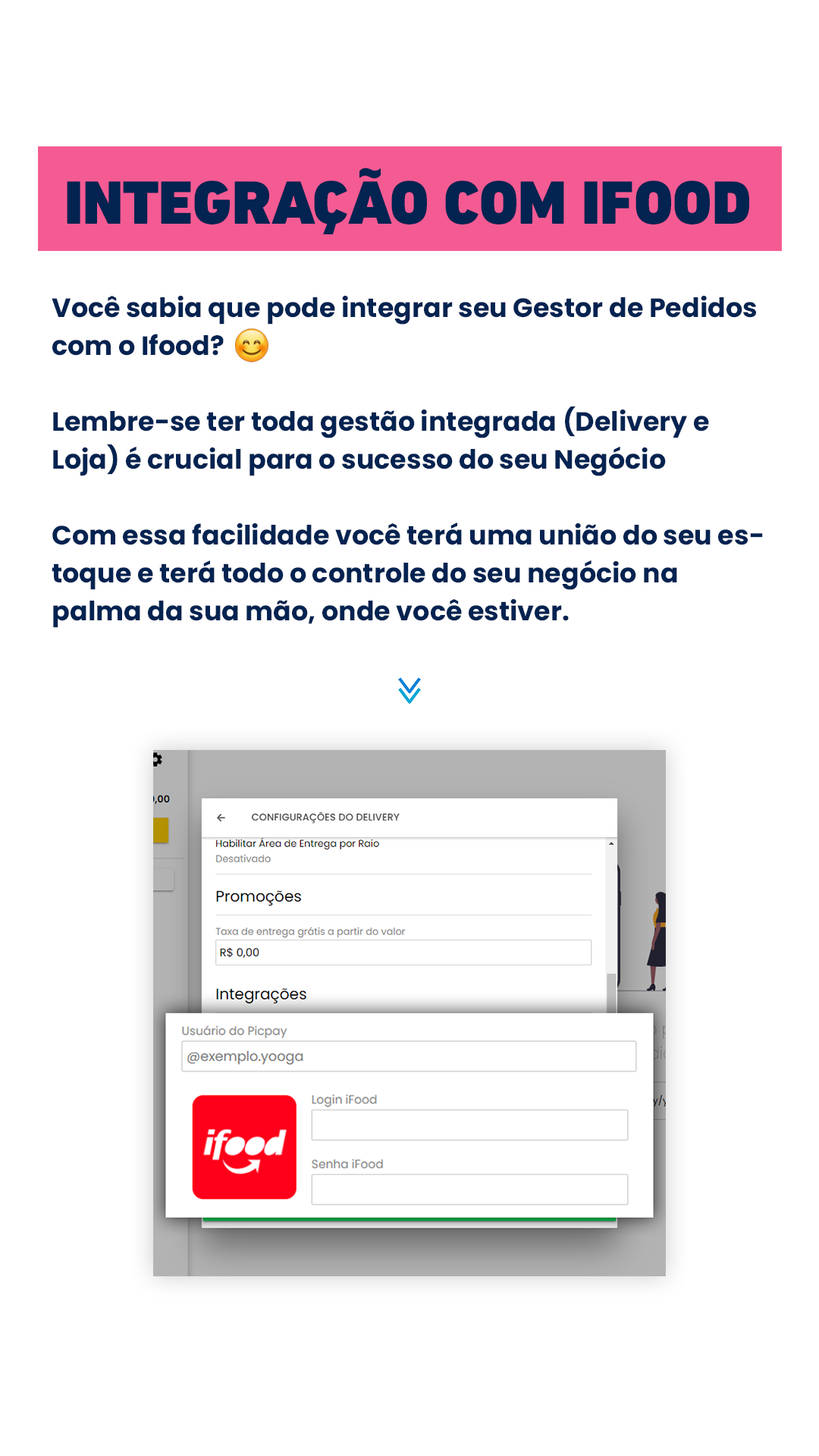
<style>
.page{position:relative;width:819px;height:1456px;background:#ffffff}
.page>*{position:absolute;margin:0}
.t1{font:62.1px "DINNextLTPro-Black";color:#032351;text-transform:uppercase}
.t2{font:26.5px/37.9px "Poppins-Bold";color:#032351}
</style>
<div class="page">
<p class="t1" style="left:67px;top:168px;width:682px;height:66px">INTEGRAÇÃO COM IFOOD</p>
<p class="t2" style="left:52px;top:296px;width:711px;height:332px">Você sabia que pode integrar seu Gestor de Pedidos com o Ifood? <br><br>Lembre-se ter toda gestão integrada (Delivery e Loja) é crucial para o sucesso do seu Negócio<br><br>Com essa facilidade você terá uma união do seu estoque e terá todo o controle do seu negócio na palma da sua mão, onde você estiver.</p>
</div>
